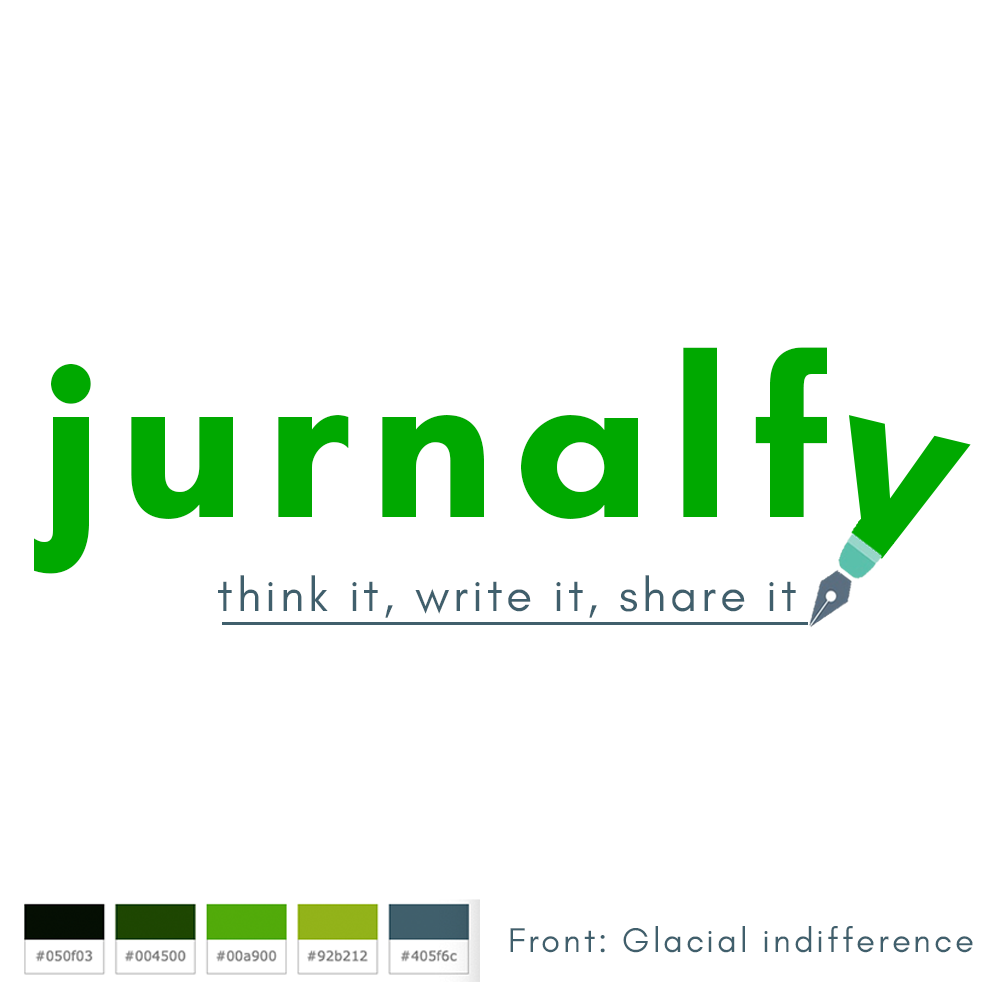
<style>
.page{position:relative;width:1000px;height:1000px;background:#ffffff}
.page>*{position:absolute;margin:0}
.t1{font:225.7px "GlacialIndifference-Bold";letter-spacing:0.08em;color:#00a900}
.t2{font:47.8px "GlacialIndifference-Regular";letter-spacing:0.08em;color:#405f6c}
.t3{font:34.8px "GlacialIndifference-Regular";letter-spacing:0.08em;color:#405f6c}
</style>
<div class="page">
<p class="t1" style="left:34px;top:347px;width:793px;height:227px">jurnalf</p>
<p class="t2" style="left:218px;top:575px;width:578px;height:43px">think it, write it, share it</p>
<p class="t3" style="left:510px;top:926px;width:463px;height:27px">Front: Glacial indifference</p>
</div>
